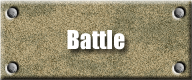
<style>
.page{position:relative;width:192px;height:80px}
.page>*{position:absolute;margin:0}
.t1{font:24px "Impact";color:#ffffff}
</style>
<div class="page">
<p class="t1" style="left:67px;top:30px;width:58px;height:20px">Battle</p>
</div>
